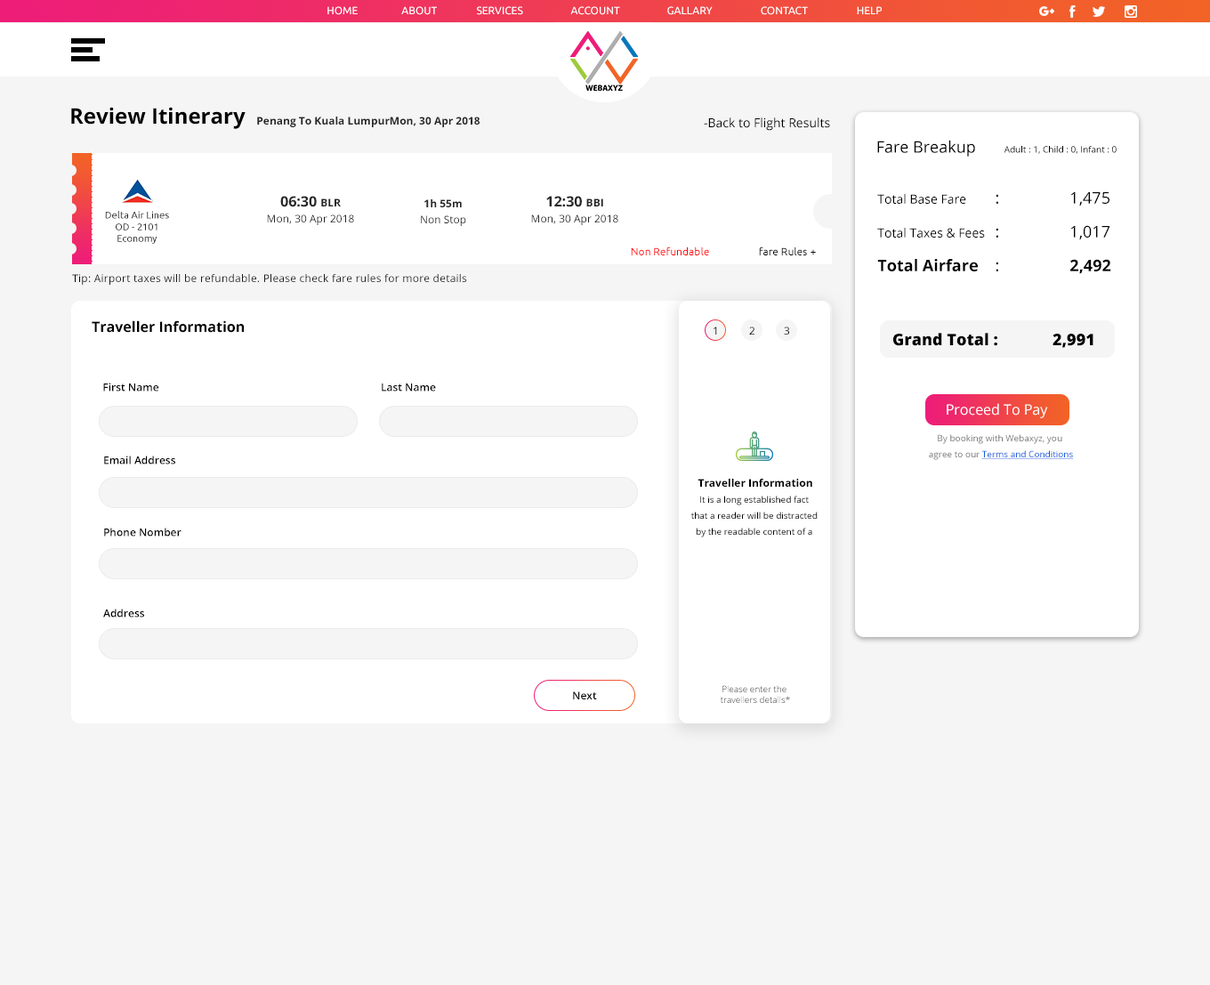
<style>
.page{position:relative;width:1210px;height:985px;background:#f5f5f5}
.page>*{position:absolute;margin:0}
.t1{font:10.7px "Ubuntu-Regular";color:#ffffff;text-transform:uppercase}
.t2{font:21.4px "OpenSans-Bold";color:#000000}
.t3{font:10.7px "OpenSans-Bold";color:#262626}
.t4{font:12.5px "OpenSans-Regular";color:#000000}
.t5{font:8.9px "OpenSans-Regular";color:#000000}
.t6{font:16px "OpenSans-Regular";color:#000000}
.t7{font:10.7px/16px "OpenSans-Regular";color:#262626}
.t8{font:14.2px "OpenSans-Bold";color:#262626}
.t9{font:10.7px/16px "OpenSans-Bold";color:#262626}
.t10{font:12.5px/33.8px "OpenSans-Regular";color:#000000}
.t11{font:16px/33.8px "OpenSans-Regular";letter-spacing:-0.12em;color:#000000}
.t12{font:16px/33.8px "OpenSans-Regular";color:#000000}
.t13{font:16px/33.8px "OpenSans-Bold";color:#000000}
.t14{font:9.8px "Ubuntu-Regular";color:#262626}
.t15{font:10.7px "Ubuntu-Regular"}
.t16{font:10.7px "OpenSans-Regular";letter-spacing:0.02em;color:#1a1a1a}
.t17{font:10.7px "OpenSans-Regular";letter-spacing:0.02em;color:#010101}
.t18{font:14.2px "OpenSans-Bold";color:#000000}
.t19{font:10.7px "OpenSans-Regular"}
.t20{font:10.7px "OpenSans-Regular";color:#000000}
.t21{font:16px "OpenSans-ExtraBold";color:#000000}
.t22{font:10.7px "OpenSans-SemiBold";color:#010101}
.t23{font:14.2px "OpenSans-Regular";color:#ffffff}
.t24{font:8.9px/16px "OpenSans-Regular";color:#787878}
.t25{font:8.9px/16px "OpenSans-Regular";color:#0e5bdc;text-decoration:underline}
.t26{font:8.9px/16px "OpenSans-Regular";color:#000000}
.t27{font:10.7px/16px "OpenSans-Bold";color:#000000}
.t28{font:8.9px/10.7px "OpenSans-Light"}
.t29{font:10.7px "OpenSans-SemiBold";color:#000000}
</style>
<div class="page">
<p class="t1" style="left:328px;top:6px;width:30px;height:9px">Home</p>
<p class="t1" style="left:401px;top:6px;width:36px;height:9px">About</p>
<p class="t1" style="left:477px;top:6px;width:46px;height:9px">Services</p>
<p class="t1" style="left:570px;top:6px;width:50px;height:9px">Account</p>
<p class="t1" style="left:667px;top:6px;width:46px;height:9px">Gallary</p>
<p class="t1" style="left:761px;top:6px;width:47px;height:9px">Contact</p>
<p class="t1" style="left:857px;top:6px;width:25px;height:8px">help</p>
<p class="t2" style="left:71px;top:107px;width:175px;height:22px">Review Itinerary</p>
<p class="t3" style="left:257px;top:117px;width:223px;height:10px">Penang To Kuala LumpurMon, 30 Apr 2018</p>
<p class="t4" style="left:704px;top:117px;width:126px;height:14px">-Back to Flight Results</p>
<p class="t5" style="left:878px;top:140px;width:239px;height:17px"><span class="t6">Fare Breakup    </span>Adult : 1, Child : 0, Infant : 0</p>
<p class="t7" style="left:267px;top:196px;width:87px;height:29px;text-align:center"><span class="t8">06:30 </span><span class="t9">BLR<br></span>Mon, 30 Apr 2018</p>
<p class="t7" style="left:531px;top:196px;width:88px;height:29px;text-align:center"><span class="t8">12:30 </span><span class="t9">BBI<br></span>Mon, 30 Apr 2018</p>
<p class="t10" style="left:878px;top:192px;width:234px;height:82px">Total Base Fare       <span class="t11">:</span><span class="t12">   1,475<br></span>Total Taxes &amp; Fees   <span class="t12">:   1,017<br></span><span class="t13">Total Airfare    </span><span class="t12">:   </span><span class="t13">2,492</span></p>
<p class="t7" style="left:421px;top:199px;width:45px;height:27px;text-align:center"><span class="t3">1h 55m<br></span>Non Stop</p>
<p class="t14" style="left:105px;top:211px;width:64px;height:33px;text-align:center">Delta Air Lines<br>OD - 2101<br>Economy</p>
<p class="t15" style="left:631px;top:247px;width:185px;height:8px">Non Refundable   fare Rules +</p>
<p class="t16" style="left:72px;top:274px;width:395px;height:11px"><span class="t17">Tip: </span>Airport taxes will be refundable. Please check fare rules for more details</p>
<p class="t18" style="left:92px;top:320px;width:152px;height:13px">Traveller Information</p>
<p class="t19" style="left:714px;top:327px;width:3px;height:8px">1</p>
<p class="t20" style="left:749px;top:327px;width:6px;height:8px">2</p>
<p class="t20" style="left:784px;top:327px;width:5px;height:8px">3</p>
<p class="t21" style="left:894px;top:333px;width:200px;height:15px">Grand Total :  2,991</p>
<p class="t22" style="left:103px;top:383px;width:56px;height:9px">First Name</p>
<p class="t22" style="left:382px;top:384px;width:54px;height:8px">Last Name</p>
<p class="t23" style="left:947px;top:403px;width:101px;height:15px">Proceed To Pay</p>
<p class="t24" style="left:929px;top:434px;width:145px;height:26px;text-align:center">By booking with Webaxyz, you <br>agree to our <span class="t25">Terms and Conditions</span></p>
<p class="t22" style="left:104px;top:456px;width:71px;height:9px">Email Address</p>
<p class="t26" style="left:692px;top:479px;width:126px;height:59px;text-align:center"><span class="t27">Traveller Information<br></span>It is a long established fact <br>that a reader will be distracted <br>by the readable content of a</p>
<p class="t22" style="left:104px;top:528px;width:78px;height:9px">Phone Nomber</p>
<p class="t22" style="left:103px;top:609px;width:41px;height:9px">Address</p>
<p class="t28" style="left:720px;top:685px;width:70px;height:18px;text-align:center">Please enter the <br>travellers details*</p>
<p class="t29" style="left:573px;top:692px;width:24px;height:8px">Next</p>
</div>
